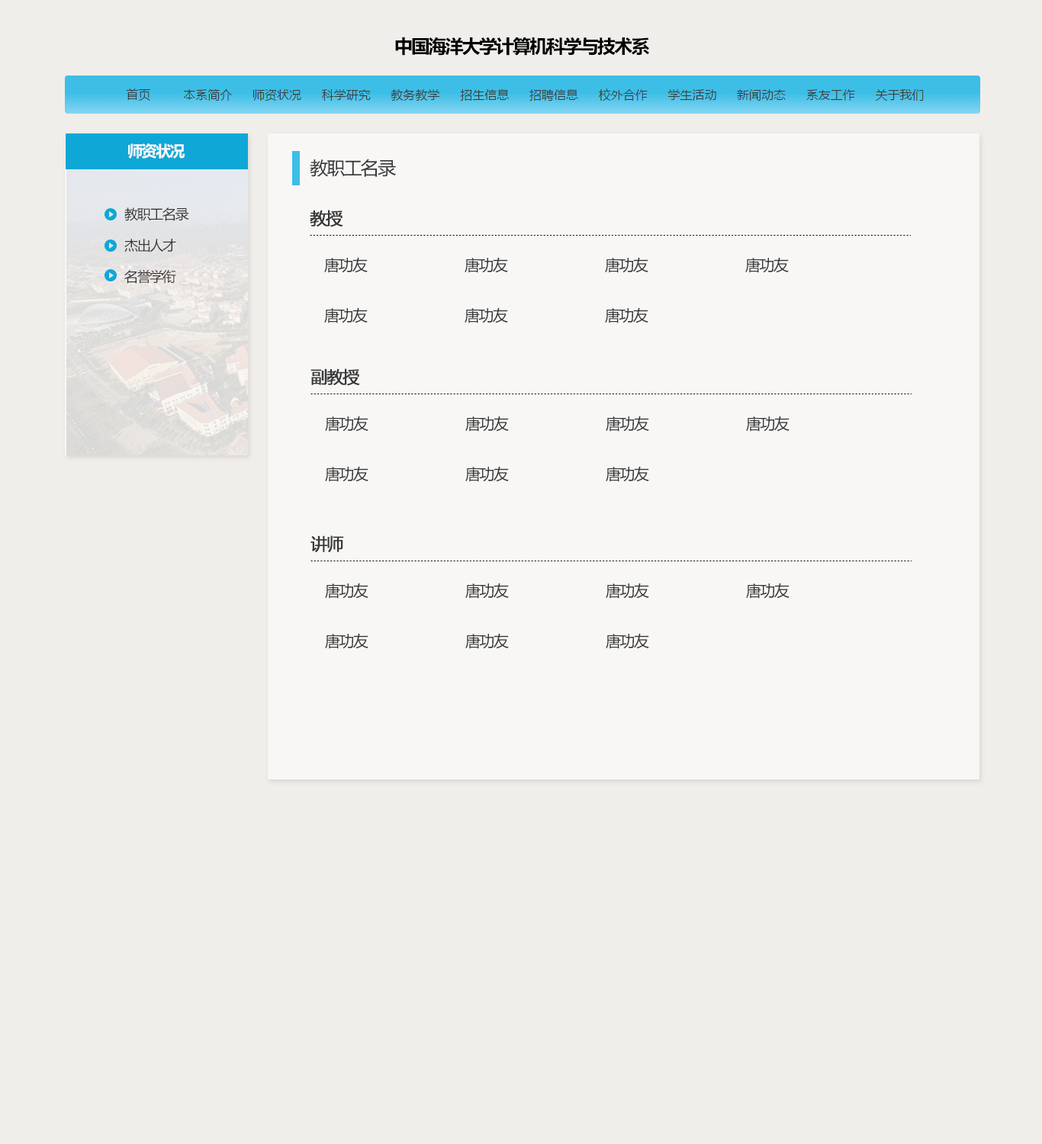
<style>
.page{position:relative;width:1042px;height:1144px;background:#f0eeea}
.page>*{position:absolute;margin:0}
.t1{font:18.3px "MicrosoftYaHei-Bold";letter-spacing:-0.076em;color:#000000}
.t2{font:15.3px "MicrosoftYaHei-Bold";letter-spacing:-0.076em;color:#f9f9f9}
.t3{font:18.3px "MicrosoftYaHei";letter-spacing:-0.076em;color:#383838}
.t4{font:13.7px "MicrosoftYaHei";letter-spacing:-0.076em;color:#383838}
.t5{font:16.8px "MicrosoftYaHei";letter-spacing:-0.076em;color:#383838;font-weight:bold}
.t6{font:15.3px "MicrosoftYaHei";letter-spacing:-0.076em;color:#383838}
</style>
<div class="page">
<p class="t1" style="left:395px;top:37px;width:254px;height:19px">中国海洋大学计算机科学与技术系</p>
<p class="t2" style="left:128px;top:143px;width:57px;height:16px">师资状况</p>
<p class="t3" style="left:310px;top:159px;width:86px;height:18px">教职工名录</p>
<p class="t4" style="left:124px;top:207px;width:65px;height:14px">教职工名录</p>
<p class="t5" style="left:310px;top:210px;width:33px;height:17px">教授</p>
<p class="t4" style="left:124px;top:239px;width:52px;height:14px">杰出人才</p>
<p class="t6" style="left:324px;top:257px;width:44px;height:16px">唐功友</p>
<p class="t6" style="left:465px;top:257px;width:43px;height:16px">唐功友</p>
<p class="t6" style="left:605px;top:257px;width:43px;height:16px">唐功友</p>
<p class="t6" style="left:745px;top:257px;width:44px;height:16px">唐功友</p>
<p class="t4" style="left:124px;top:269px;width:52px;height:15px">名誉学衔</p>
<p class="t6" style="left:324px;top:307px;width:44px;height:16px">唐功友</p>
<p class="t6" style="left:465px;top:307px;width:43px;height:16px">唐功友</p>
<p class="t6" style="left:605px;top:307px;width:43px;height:16px">唐功友</p>
<p class="t5" style="left:310px;top:368px;width:50px;height:18px">副教授</p>
<p class="t6" style="left:325px;top:416px;width:43px;height:16px">唐功友</p>
<p class="t6" style="left:465px;top:416px;width:44px;height:16px">唐功友</p>
<p class="t6" style="left:606px;top:416px;width:43px;height:16px">唐功友</p>
<p class="t6" style="left:746px;top:416px;width:44px;height:16px">唐功友</p>
<p class="t6" style="left:325px;top:466px;width:43px;height:16px">唐功友</p>
<p class="t6" style="left:465px;top:466px;width:44px;height:16px">唐功友</p>
<p class="t6" style="left:606px;top:466px;width:43px;height:16px">唐功友</p>
<p class="t5" style="left:310px;top:536px;width:34px;height:16px">讲师</p>
<p class="t6" style="left:325px;top:583px;width:43px;height:16px">唐功友</p>
<p class="t6" style="left:465px;top:583px;width:44px;height:16px">唐功友</p>
<p class="t6" style="left:606px;top:583px;width:43px;height:16px">唐功友</p>
<p class="t6" style="left:746px;top:583px;width:44px;height:16px">唐功友</p>
<p class="t6" style="left:325px;top:633px;width:43px;height:16px">唐功友</p>
<p class="t6" style="left:465px;top:633px;width:44px;height:16px">唐功友</p>
<p class="t6" style="left:606px;top:633px;width:43px;height:16px">唐功友</p>
</div>
